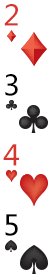
<style>
.page{position:relative;width:50px;height:280px;background:#ffffff}
.page>*{position:absolute;margin:0}
.t1{font:28px "MicrosoftYaHei";letter-spacing:0.04em;color:#d6362e;text-transform:uppercase}
.t2{font:28px "MicrosoftYaHei";letter-spacing:0.04em;color:#000000;text-transform:uppercase}
</style>
<div class="page">
<p class="t1" style="left:4px;top:4px;width:14px;height:22px">2</p>
<p class="t2" style="left:5px;top:74px;width:13px;height:22px">3</p>
<p class="t1" style="left:3px;top:144px;width:16px;height:22px">4</p>
<p class="t2" style="left:5px;top:214px;width:13px;height:22px">5</p>
</div>
